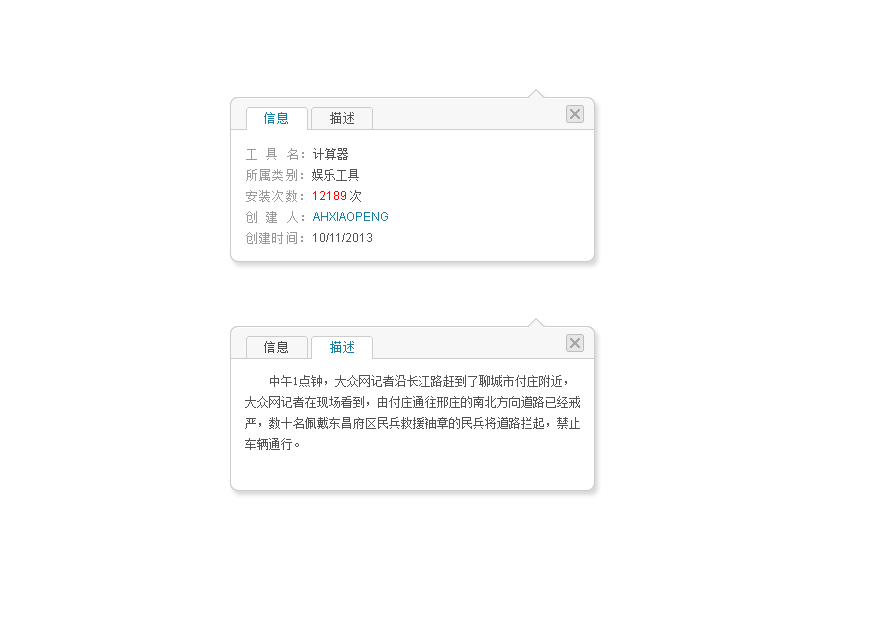
<style>
.page{position:relative;width:885px;height:622px;background:#ffffff}
.page>*{position:absolute;margin:0}
.t1{font:12px "SimSun";letter-spacing:0.1em;color:#137fa5}
.t2{font:12px "SimSun";letter-spacing:0.1em;color:#525252}
.t3{font:12px/21px "ArialMT";color:#137fa5}
.t4{font:12px/21px "SimSun";letter-spacing:0.1em;color:#999999}
.t5{font:12px/21px "SimSun";color:#525252}
.t6{font:12px/21px "ArialMT";color:#ff0000}
.t7{font:12px/21px "ArialMT";color:#525252}
.t8{font:12px "SimSun";letter-spacing:0.1em;color:#464646}
</style>
<div class="page">
<p class="t1" style="left:264px;top:112px;width:24px;height:12px">信息</p>
<p class="t2" style="left:330px;top:112px;width:24px;height:12px">描述</p>
<p class="t3" style="left:246px;top:148px;width:142px;height:96px"><span class="t4">工 具 名：</span><span class="t5">计算器<br></span><span class="t4">所属类别：</span><span class="t5">娱乐工具<br></span><span class="t4">安装次数：</span><span class="t6">12189 </span><span class="t5">次<br></span><span class="t4">创 建 人：</span>AHXIAOPENG<br><span class="t4">创建时间：</span><span class="t7">10/11/2013</span></p>
<p class="t8" style="left:264px;top:341px;width:24px;height:12px">信息</p>
<p class="t1" style="left:330px;top:341px;width:24px;height:12px">描述</p>
<p class="t5" style="left:245px;top:375px;width:335px;height:75px">中午1点钟，大众网记者沿长江路赶到了聊城市付庄附近，大众网记者在现场看到，由付庄通往邢庄的南北方向道路已经戒严，数十名佩戴东昌府区民兵救援袖章的民兵将道路拦起，禁止车辆通行。</p>
</div>
